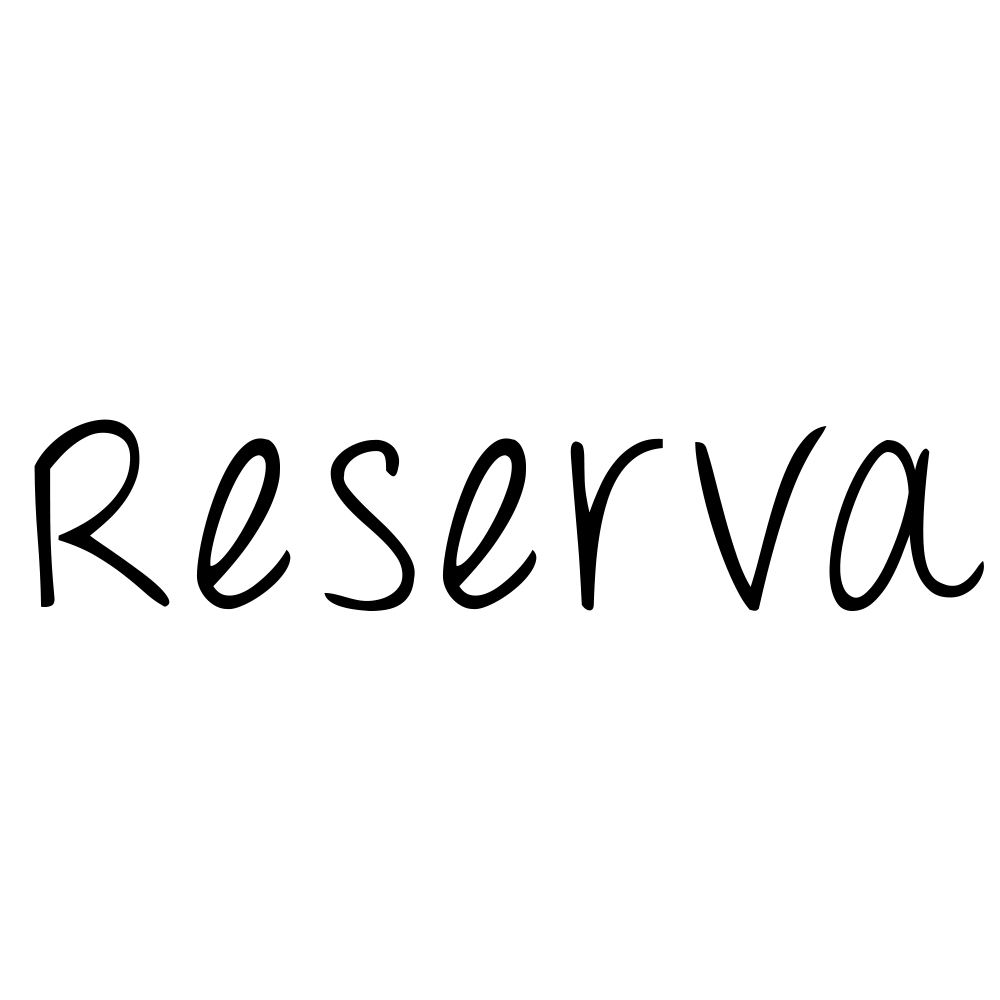
<style>
.page{position:relative;width:1000px;height:1000px;background:#ffffff}
.page>*{position:absolute;margin:0}
.t1{font:277.8px "ThrowMyHandsUpintheAir";letter-spacing:0.075em;color:#000000}
</style>
<div class="page">
<p class="t1" style="left:34px;top:419px;width:950px;height:192px">Reserva</p>
</div>
